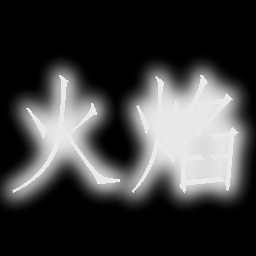
<style>
.page{position:relative;width:256px;height:256px;background:#000000}
.page>*{position:absolute;margin:0}
.t1{font:127.8px "FangSong";color:#e9e9e9}
</style>
<div class="page">
<p class="t1" style="left:12px;top:75px;width:108px;height:118px">火</p>
<p class="t1" style="left:132px;top:75px;width:107px;height:118px">焰</p>
</div>
